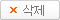
<style>
.page{position:relative;width:60px;height:20px;background:#ffffff}
.page>*{position:absolute;margin:0}
.t1{font:12px "Dotum";color:#757575}
</style>
<div class="page">
<p class="t1" style="left:23px;top:5px;width:21px;height:11px">삭제</p>
</div>
